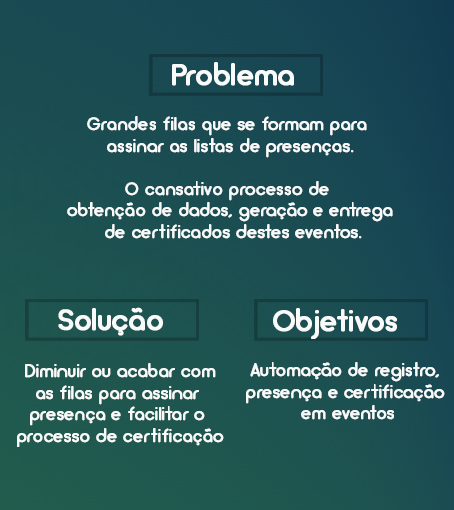
<style>
.page{position:relative;width:454px;height:510px}
.page>*{position:absolute;margin:0}
.t1{font:30px "Arciform";color:#f9fafa;font-weight:bold}
.t2{font:18px "Arciform";color:#f9fafa;font-weight:bold}
</style>
<div class="page">
<p class="t1" style="left:172px;top:62px;width:122px;height:24px">Problema</p>
<p class="t2" style="left:67px;top:116px;width:326px;height:123px;text-align:center">Grandes filas que se formam para <br>assinar as listas de presenças.<br><br>O cansativo processo de <br>obtenção de dados, geração e entrega<br> de certificados destes eventos.</p>
<p class="t1" style="left:58px;top:307px;width:105px;height:29px">Solução</p>
<p class="t1" style="left:273px;top:308px;width:124px;height:31px">Objetivos</p>
<p class="t2" style="left:17px;top:363px;width:207px;height:84px;text-align:center">Diminuir ou acabar com<br>as filas para assinar <br>presença e facilitar o <br>processo de certificação</p>
<p class="t2" style="left:246px;top:362px;width:199px;height:58px;text-align:center">Automação de registro,<br>presença e certificação<br> em eventos</p>
</div>
